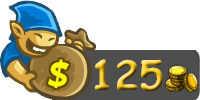
<style>
.page{position:relative;width:200px;height:100px;background:#ffffff}
.page>*{position:absolute;margin:0}
.t1{font:40px "ComicSansMS-Bold"}
</style>
<div class="page">
<p class="t1" style="left:94px;top:59px;width:69px;height:33px">125</p>
</div>
